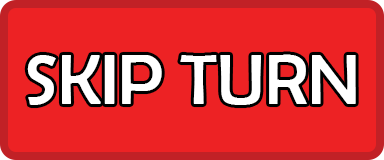
<style>
.page{position:relative;width:384px;height:160px;background:#ed2224}
.page>*{position:absolute;margin:0}
.t1{font:72px "BerlinSansFB-Reg";color:#ffffff}
</style>
<div class="page">
<p class="t1" style="left:27px;top:54px;width:329px;height:51px">SKIP TURN</p>
</div>
